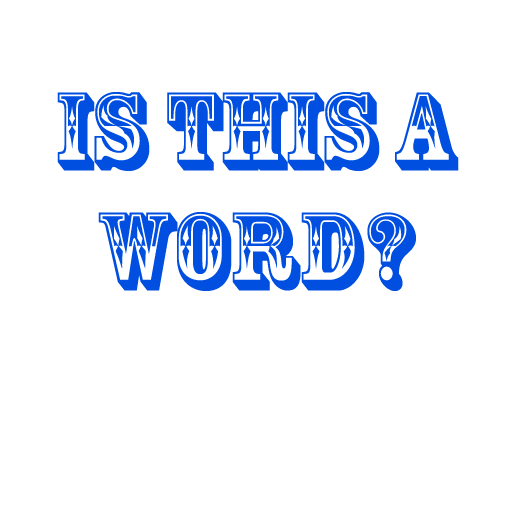
<style>
.page{position:relative;width:512px;height:512px;background:#ffffff}
.page>*{position:absolute;margin:0}
.t1{font:104px/120px "RosewoodStd-Regular";color:#004fe0}
</style>
<div class="page">
<p class="t1" style="left:57px;top:92px;width:402px;height:199px;text-align:center">is this a<br>word?</p>
</div>
